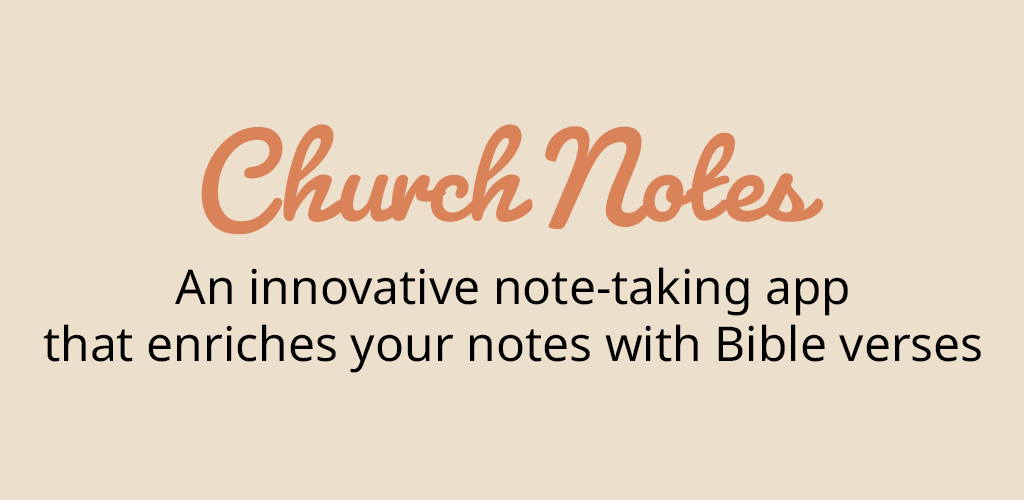
<style>
.page{position:relative;width:1024px;height:500px;background:#ecdfcc}
.page>*{position:absolute;margin:0}
.t1{font:140px "Pacifico-Bold";color:#da8359}
.t2{font:48px "NotoSans-Regular";color:#000000}
</style>
<div class="page">
<p class="t1" style="left:201px;top:124px;width:622px;height:111px">Church Notes</p>
<p class="t2" style="left:43px;top:267px;width:938px;height:106px;text-align:center">An innovative note-taking app<br>that enriches your notes with Bible verses</p>
</div>
